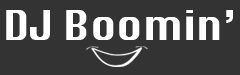
<style>
.page{position:relative;width:240px;height:75px;background:#333333}
.page>*{position:absolute;margin:0}
.t1{font:40px "Silom";color:#ffffff}
</style>
<div class="page">
<p class="t1" style="left:6px;top:10px;width:227px;height:30px">DJ Boomin’</p>
</div>
